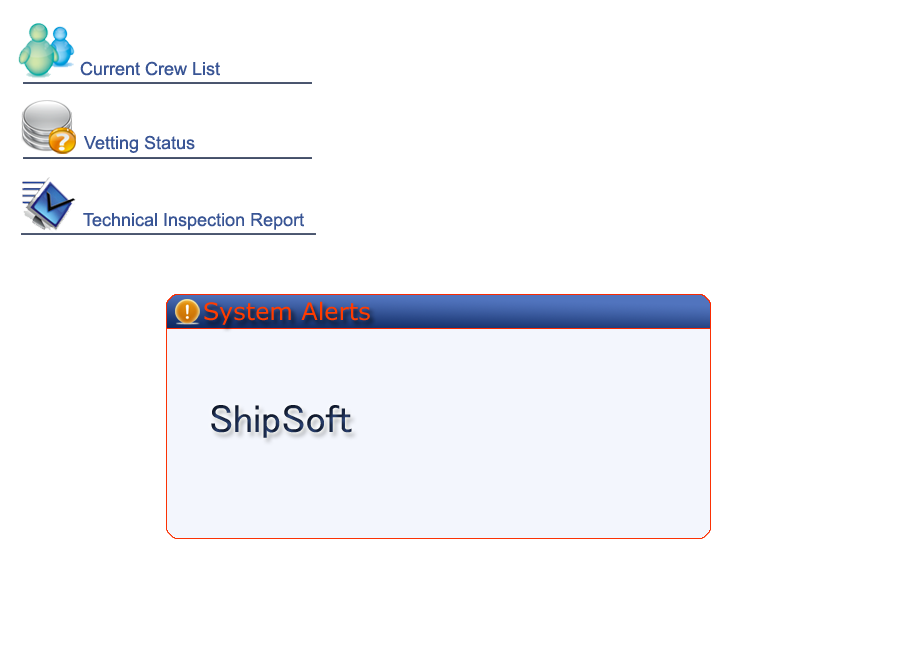
<style>
.page{position:relative;width:900px;height:650px;background:#ffffff}
.page>*{position:absolute;margin:0}
.t1{font:18px "ArialMT";color:#395595}
.t2{font:24px "Verdana";color:#ff3c00}
.t3{font:40px "MS-PGothic"}
</style>
<div class="page">
<p class="t1" style="left:80px;top:61px;width:140px;height:15px">Current Crew List</p>
<p class="t1" style="left:84px;top:135px;width:111px;height:18px">Vetting Status</p>
<p class="t1" style="left:83px;top:213px;width:221px;height:17px">Technical Inspection Report</p>
<p class="t2" style="left:204px;top:301px;width:166px;height:24px">System Alerts</p>
<p class="t3" style="left:211px;top:405px;width:141px;height:33px">ShipSoft</p>
</div>
